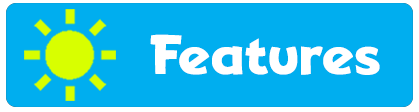
<style>
.page{position:relative;width:419px;height:112px;background:#00aeef}
.page>*{position:absolute;margin:0}
.t1{font:48.9px "Adventuring";letter-spacing:-0.02em;color:#ffffff}
</style>
<div class="page">
<p class="t1" style="left:150px;top:34px;width:230px;height:41px">Features</p>
</div>
